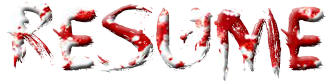
<style>
.page{position:relative;width:326px;height:82px;background:#ffffff}
.page>*{position:absolute;margin:0}
.t1{font:120px "DKFaceYourFears"}
</style>
<div class="page">
<p class="t1" style="left:0px;top:0px;width:326px;height:82px">resume</p>
</div>
